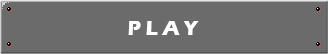
<style>
.page{position:relative;width:328px;height:54px;background:#6b6b6b}
.page>*{position:absolute;margin:0}
.t1{font:21px "ErasITC-Bold";letter-spacing:0.22em;color:#ffffff}
</style>
<div class="page">
<p class="t1" style="left:128px;top:21px;width:71px;height:14px">PLAY</p>
</div>
